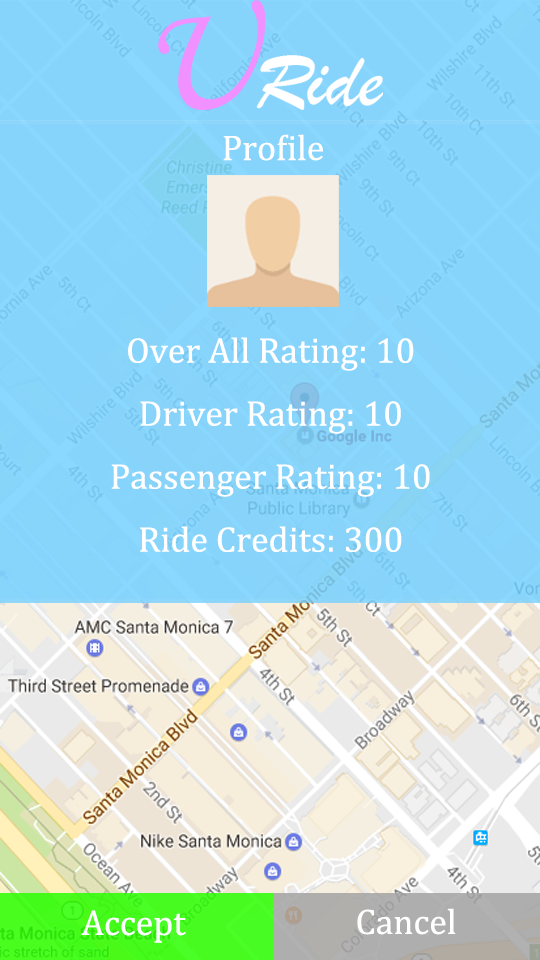
<style>
.page{position:relative;width:540px;height:960px;background:#86d4fc}
.page>*{position:absolute;margin:0}
.t1{font:36px "CambriaMath";color:#ffffff}
</style>
<div class="page">
<p class="t1" style="left:223px;top:134px;width:100px;height:27px">Profile</p>
<p class="t1" style="left:111px;top:337px;width:319px;height:215px;text-align:center">Over All Rating: 10<br>Driver Rating: 10<br>Passenger Rating: 10<br>Ride Credits: 300</p>
<p class="t1" style="left:81px;top:910px;width:105px;height:33px">Accept</p>
<p class="t1" style="left:357px;top:908px;width:99px;height:27px">Cancel</p>
</div>
